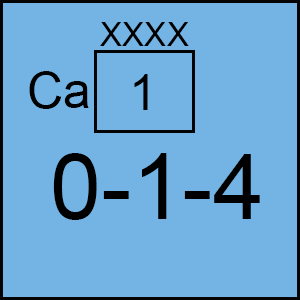
<style>
.page{position:relative;width:300px;height:300px;background:#74b4e4}
.page>*{position:absolute;margin:0}
.t1{font:33.3px "ArialMT";color:#000000}
.t2{font:50px "ArialMT";color:#000000}
.t3{font:91.7px "ArialMT";color:#000000}
</style>
<div class="page">
<p class="t1" style="left:100px;top:22px;width:89px;height:24px">XXXX</p>
<p class="t2" style="left:29px;top:71px;width:60px;height:38px">Ca</p>
<p class="t2" style="left:134px;top:74px;width:14px;height:36px">1</p>
<p class="t3" style="left:53px;top:153px;width:207px;height:67px">0-1-4</p>
</div>
